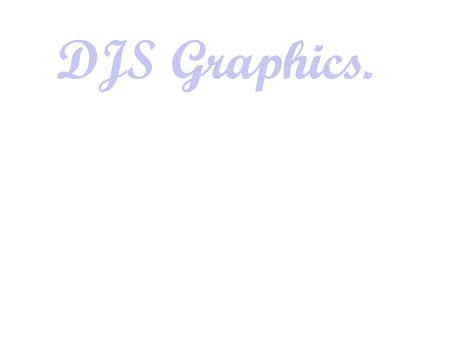
<style>
.page{position:relative;width:454px;height:340px;background:#ffffff}
.page>*{position:absolute;margin:0}
.t1{font:55px "ScriptMTBold";color:#c6c6f2}
</style>
<div class="page">
<p class="t1" style="left:56px;top:39px;width:317px;height:54px">DJS Graphics.</p>
</div>
